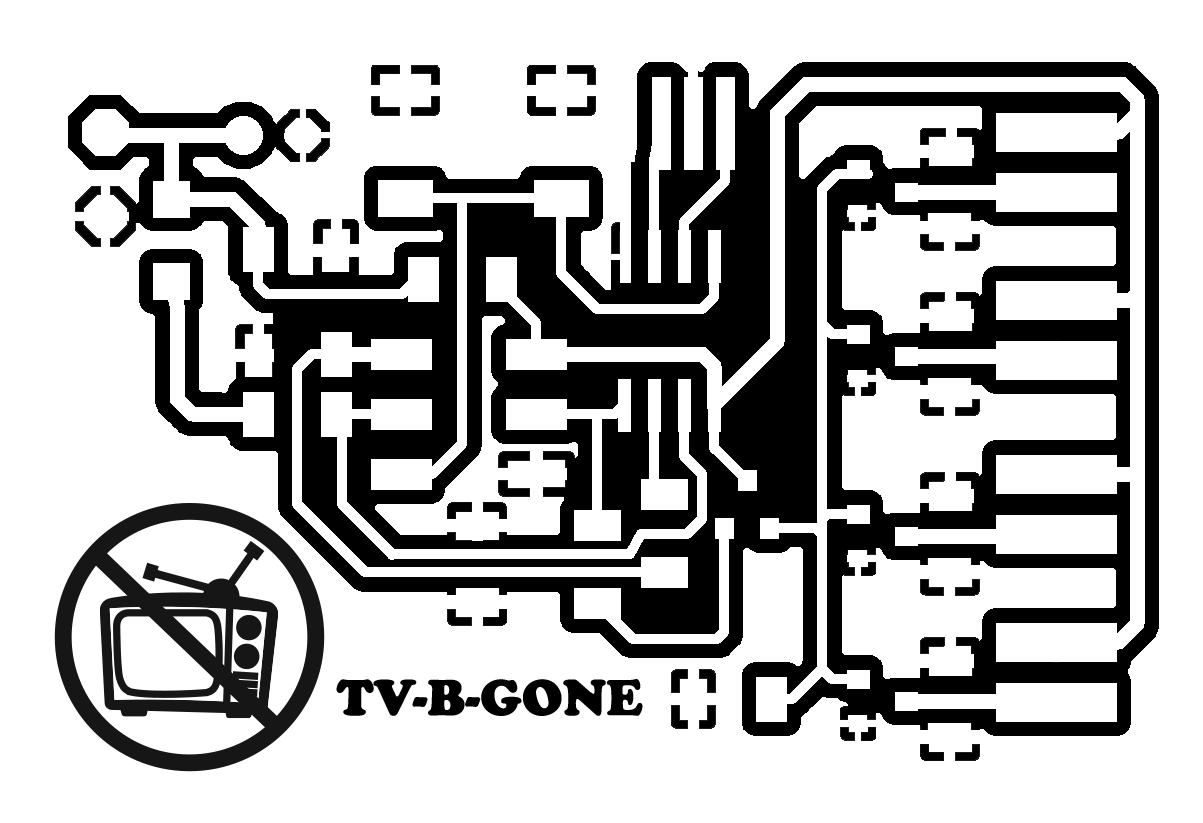
<style>
.page{position:relative;width:1203px;height:823px;background:#ffffff}
.page>*{position:absolute;margin:0}
.t1{font:50px "CooperBlackStd";color:#000000}
</style>
<div class="page">
<p class="t1" style="left:336px;top:679px;width:307px;height:37px">TV-B-GONE</p>
</div>
